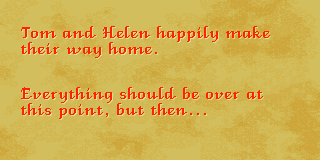
<style>
.page{position:relative;width:320px;height:160px;background:#d2be5d}
.page>*{position:absolute;margin:0}
.t1{font:20px/16px "VeniceClassic";letter-spacing:0.05em;color:#ff2400}
</style>
<div class="page">
<p class="t1" style="left:21px;top:26px;width:249px;height:32px">Tom and Helen happily make<br>their way home.</p>
<p class="t1" style="left:21px;top:87px;width:242px;height:32px">Everything should be over at<br>this point, but then...</p>
</div>
